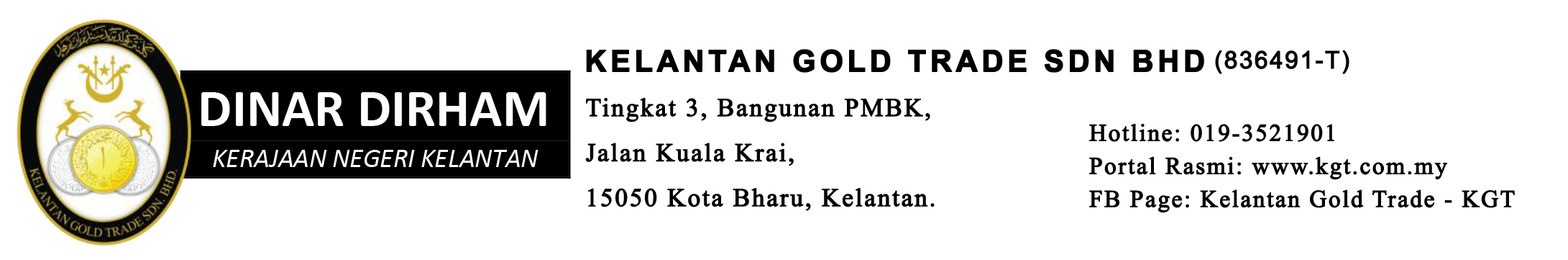
<style>
.page{position:relative;width:1568px;height:260px;background:#ffffff}
.page>*{position:absolute;margin:0}
.t1{font:30px "Arial-BoldMT";letter-spacing:0.11em;color:#000000;font-weight:bold}
.t2{font:24px "ArialMT";letter-spacing:0.05em;color:#000000;font-weight:bold}
.t3{font:25.5px/45px "TimesNewRomanPSMT";letter-spacing:0.05em;color:#000000;font-weight:bold}
.t4{font:24px/33px "TimesNewRomanPSMT";letter-spacing:0.05em;color:#000000;font-weight:bold}
</style>
<div class="page">
<p class="t1" style="left:586px;top:49px;width:618px;height:24px">KELANTAN GOLD TRADE SDN BHD</p>
<p class="t2" style="left:1215px;top:50px;width:134px;height:24px">(836491-T)</p>
<p class="t3" style="left:585px;top:97px;width:350px;height:114px;text-align:right">Tingkat 3, Bangunan PMBK,<br>Jalan Kuala Krai,<br>15050 Kota Bharu, Kelantan.</p>
<p class="t4" style="left:1089px;top:123px;width:426px;height:89px;text-align:right">Hotline: 019-3521901<br>Portal Rasmi: www.kgt.com.my<br>FB Page: Kelantan Gold Trade - KGT</p>
</div>
